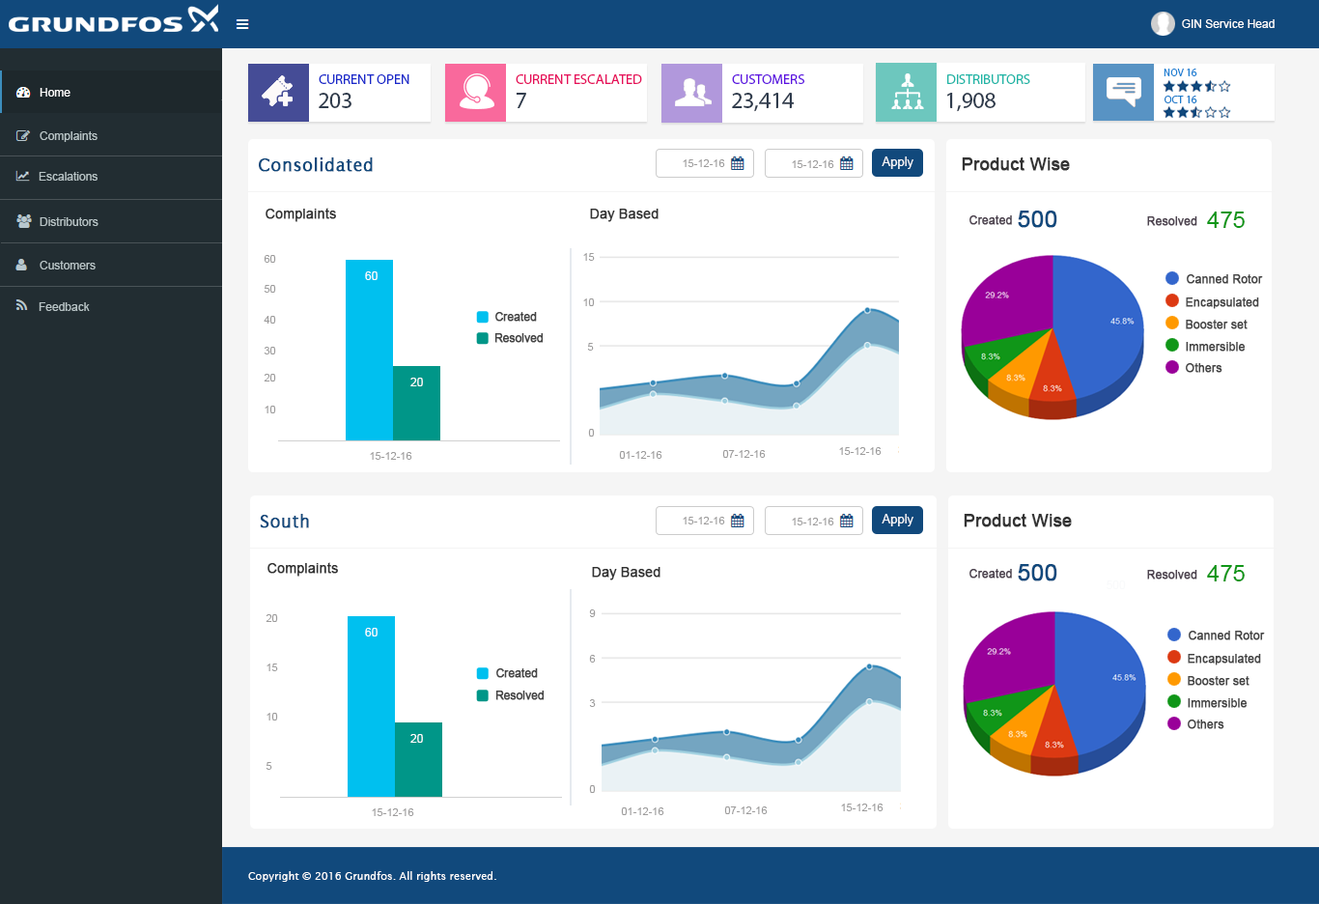
<style>
.page{position:relative;width:1319px;height:904px;background:#ffffff}
.page>*{position:absolute;margin:0}
.t1{font:11.6px "ArialMT";color:#fffefd}
.t2{font:14.1px "MyriadPro-Regular";color:#1928ca;text-transform:uppercase}
.t3{font:34.8px "MyriadPro-Regular";color:#2f3b4c}
.t4{font:14.1px "MyriadPro-Regular";color:#e60d5a;text-transform:uppercase}
.t5{font:14.1px "MyriadPro-Regular";color:#5e12e1;text-transform:uppercase}
.t6{font:14.1px "MyriadPro-Regular";color:#1db5a6;text-transform:uppercase}
.t7{font:14.1px "MyriadPro-Regular";color:#6dc7be;text-transform:uppercase}
.t8{font:10.6px "MyriadPro-Regular";color:#1f81d3}
.t9{font:11.6px "ArialMT";color:#ffffff}
.t10{font:23.2px "MyriadPro-Regular";color:#2f3b4c}
.t11{font:10.6px "MyriadPro-Regular";color:#1d7ccb}
.t12{font:11.6px "ArialMT";color:#b8c4c6}
.t13{font:17.4px "LucidaSans";color:#11497c;font-weight:bold}
.t14{font:10.6px "ArialMT";color:#9e9d9d}
.t15{font:12.6px "ArialMT";color:#f6f8fa}
.t16{font:17.4px "ArialMT";color:#333333;font-weight:bold}
.t17{font:13.5px "ArialMT";color:#333333;font-weight:bold}
.t18{font:11.6px "ArialMT";color:#4e4450;font-weight:bold}
.t19{font:23.2px "ArialMT";color:#11497c;font-weight:bold}
.t20{font:23.2px "ArialMT";color:#109618}
.t21{font:11.6px "ArialMT";color:#fcfdfe}
.t22{font:11.6px "ArialMT";color:#444444;font-weight:bold}
.t23{font:11.1px "ArialMT";color:#444444;font-weight:bold}
.t24{font:11.6px "ArialMT";color:#f9fafb}
.t25{font:10.6px "LucidaSans";color:#fdffff}
</style>
<div class="page">
<p class="t1" style="left:1182px;top:19px;width:93px;height:9px">GIN Service Head</p>
<p class="t2" style="left:319px;top:74px;width:90px;height:10px">Current Open <br><span class="t3">215</span></p>
<p class="t4" style="left:516px;top:74px;width:126px;height:10px">Current Escalated</p>
<p class="t5" style="left:732px;top:74px;width:72px;height:10px">Customers</p>
<p class="t6" style="left:947px;top:74px;width:83px;height:10px"><span class="t7"> </span>Distributors</p>
<p class="t8" style="left:1164px;top:69px;width:33px;height:7px">NOV 16</p>
<p class="t9" style="left:40px;top:88px;width:30px;height:9px">Home</p>
<p class="t10" style="left:319px;top:93px;width:33px;height:15px">203</p>
<p class="t10" style="left:516px;top:93px;width:10px;height:15px">7</p>
<p class="t10" style="left:732px;top:93px;width:63px;height:19px">23,414</p>
<p class="t10" style="left:947px;top:93px;width:49px;height:19px">1,908</p>
<p class="t11" style="left:1165px;top:96px;width:32px;height:7px">OCT 16</p>
<p class="t12" style="left:40px;top:131px;width:58px;height:11px">Complaints</p>
<p class="t13" style="left:259px;top:157px;width:114px;height:15px">Consolidated</p>
<p class="t14" style="left:683px;top:159px;width:42px;height:8px">15-12-16</p>
<p class="t14" style="left:792px;top:160px;width:42px;height:8px">15-12-16</p>
<p class="t15" style="left:882px;top:156px;width:32px;height:13px">Apply</p>
<p class="t16" style="left:962px;top:157px;width:108px;height:14px">Product Wise</p>
<p class="t12" style="left:39px;top:172px;width:59px;height:9px">Escalations</p>
<p class="t17" style="left:266px;top:208px;width:70px;height:14px">Complaints</p>
<p class="t17" style="left:590px;top:209px;width:69px;height:13px">Day Based</p>
<p class="t12" style="left:40px;top:217px;width:59px;height:9px">Distributors</p>
<p class="t18" style="left:970px;top:215px;width:42px;height:10px">Created</p>
<p class="t19" style="left:1018px;top:211px;width:39px;height:17px">500</p>
<p class="t18" style="left:1147px;top:216px;width:50px;height:10px">Resolved</p>
<p class="t20" style="left:1207px;top:211px;width:38px;height:17px">475</p>
<p class="t14" style="left:264px;top:255px;width:12px;height:8px">60</p>
<p class="t14" style="left:583px;top:253px;width:12px;height:8px">15</p>
<p class="t12" style="left:40px;top:261px;width:56px;height:8px">Customers</p>
<p class="t21" style="left:365px;top:271px;width:13px;height:9px">60</p>
<p class="t22" style="left:1187px;top:274px;width:76px;height:10px">Canned Rotor</p>
<p class="t14" style="left:264px;top:285px;width:12px;height:8px">50</p>
<p class="t12" style="left:39px;top:302px;width:51px;height:9px">Feedback</p>
<p class="t14" style="left:583px;top:298px;width:12px;height:8px">10</p>
<p class="t22" style="left:1186px;top:297px;width:73px;height:12px">Encapsulated</p>
<p class="t14" style="left:264px;top:316px;width:12px;height:8px">40</p>
<p class="t23" style="left:495px;top:312px;width:42px;height:10px">Created</p>
<p class="t22" style="left:1186px;top:320px;width:62px;height:9px">Booster set</p>
<p class="t23" style="left:494px;top:333px;width:50px;height:10px">Resolved</p>
<p class="t22" style="left:1186px;top:342px;width:60px;height:10px">Immersible</p>
<p class="t14" style="left:264px;top:347px;width:12px;height:7px">30</p>
<p class="t14" style="left:587px;top:343px;width:7px;height:8px">5</p>
<p class="t22" style="left:1186px;top:363px;width:37px;height:10px">Others</p>
<p class="t14" style="left:264px;top:374px;width:12px;height:7px">20</p>
<p class="t21" style="left:410px;top:378px;width:13px;height:8px">20</p>
<p class="t14" style="left:265px;top:406px;width:11px;height:7px">10</p>
<p class="t14" style="left:588px;top:429px;width:7px;height:8px">0</p>
<p class="t14" style="left:839px;top:447px;width:43px;height:8px">15-12-16</p>
<p class="t14" style="left:370px;top:452px;width:42px;height:8px">15-12-16</p>
<p class="t14" style="left:619px;top:451px;width:43px;height:8px">01-12-16</p>
<p class="t14" style="left:722px;top:450px;width:44px;height:8px">07-12-16</p>
<p class="t13" style="left:260px;top:514px;width:49px;height:14px">South</p>
<p class="t14" style="left:683px;top:517px;width:42px;height:7px">15-12-16</p>
<p class="t14" style="left:792px;top:518px;width:42px;height:7px">15-12-16</p>
<p class="t15" style="left:882px;top:514px;width:32px;height:12px">Apply</p>
<p class="t16" style="left:964px;top:514px;width:108px;height:13px">Product Wise</p>
<p class="t17" style="left:268px;top:562px;width:70px;height:15px">Complaints</p>
<p class="t17" style="left:592px;top:567px;width:69px;height:13px">Day Based</p>
<p class="t18" style="left:970px;top:569px;width:42px;height:9px">Created</p>
<p class="t19" style="left:1018px;top:564px;width:39px;height:17px">500</p>
<p class="t18" style="left:1147px;top:570px;width:50px;height:9px">Resolved</p>
<p class="t20" style="left:1207px;top:565px;width:38px;height:16px">475</p>
<p class="t24" style="left:1107px;top:580px;width:19px;height:9px"><span class="t22"><br><br> </span>500</p>
<p class="t14" style="left:266px;top:614px;width:12px;height:8px">20</p>
<p class="t14" style="left:589px;top:609px;width:7px;height:8px">9</p>
<p class="t21" style="left:365px;top:628px;width:13px;height:8px">60</p>
<p class="t22" style="left:1189px;top:631px;width:76px;height:9px">Canned Rotor</p>
<p class="t22" style="left:1188px;top:654px;width:73px;height:11px">Encapsulated</p>
<p class="t14" style="left:267px;top:663px;width:11px;height:8px">15</p>
<p class="t14" style="left:589px;top:655px;width:7px;height:7px">6</p>
<p class="t23" style="left:496px;top:668px;width:42px;height:10px">Created</p>
<p class="t22" style="left:1188px;top:676px;width:62px;height:10px">Booster set</p>
<p class="t23" style="left:495px;top:690px;width:50px;height:10px">Resolved</p>
<p class="t14" style="left:589px;top:699px;width:7px;height:8px">3</p>
<p class="t22" style="left:1188px;top:698px;width:60px;height:10px">Immersible</p>
<p class="t14" style="left:267px;top:713px;width:11px;height:7px">10</p>
<p class="t22" style="left:1188px;top:719px;width:37px;height:10px">Others</p>
<p class="t21" style="left:410px;top:734px;width:13px;height:9px">20</p>
<p class="t14" style="left:266px;top:762px;width:6px;height:8px">5</p>
<p class="t14" style="left:589px;top:785px;width:7px;height:8px">0</p>
<p class="t14" style="left:372px;top:808px;width:42px;height:8px">15-12-16</p>
<p class="t14" style="left:621px;top:807px;width:43px;height:8px">01-12-16</p>
<p class="t14" style="left:724px;top:806px;width:44px;height:8px">07-12-16</p>
<p class="t14" style="left:841px;top:803px;width:43px;height:8px">15-12-16</p>
<p class="t25" style="left:248px;top:871px;width:248px;height:11px">Copyright © 2016 Grundfos. All rights reserved.</p>
</div>
